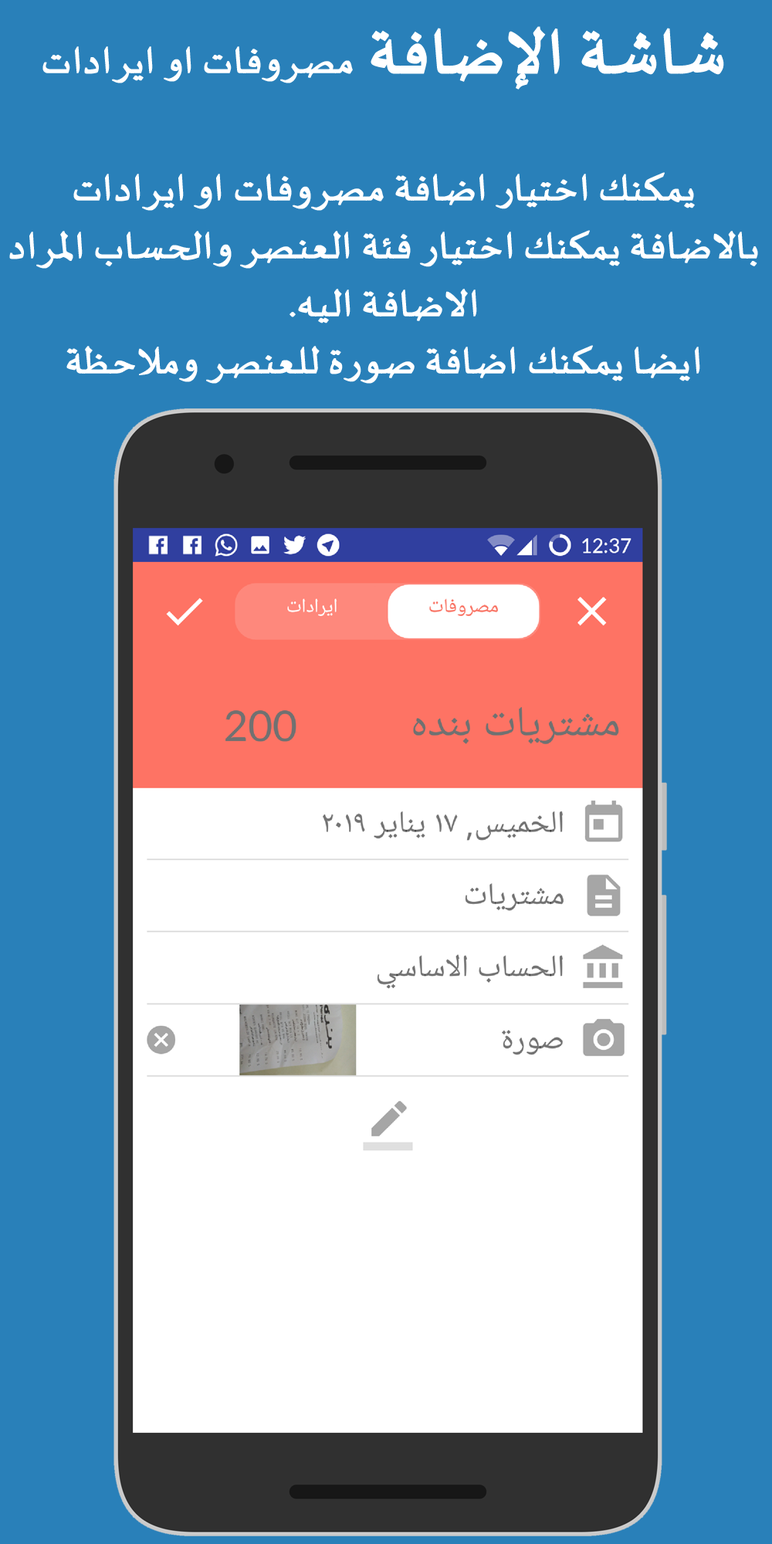
<style>
.page{position:relative;width:772px;height:1544px;background:#2980b9}
.page>*{position:absolute;margin:0}
.t1{font:48.1px "SakkalMajalla";color:#ffffff;font-weight:bold}
.t2{font:80.3px "SakkalMajalla";color:#ffffff;font-weight:bold}
</style>
<div class="page">
<p class="t1" style="left:42px;top:26px;width:682px;height:64px"><span class="t2">شاشة الإضافة </span>مصروفات او ايرادات</p>
<p class="t1" style="left:9px;top:172px;width:749px;height:212px;text-align:center">يمكنك اختيار اضافة مصروفات او ايرادات<br>بالاضافة يمكنك اختيار فئة العنصر والحساب المراد الاضافة اليه.<br>ايضا يمكنك اضافة صورة للعنصر وملاحظة</p>
</div>
